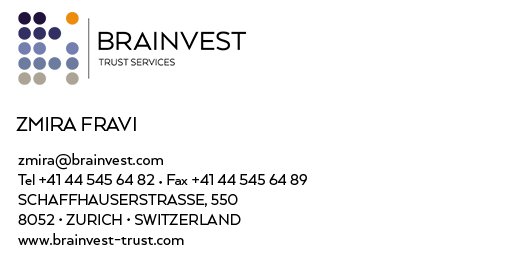
<style>
.page{position:relative;width:531px;height:260px;background:#ffffff}
.page>*{position:absolute;margin:0}
.t1{font:22px "Arquitecta";color:#000000;text-transform:uppercase}
.t2{font:17px/20px "Arquitecta";letter-spacing:-0.005em;color:#000000;text-transform:uppercase}
.t3{font:18px/20px "Arquitecta";letter-spacing:0.01em;color:#000000}
.t4{font:17px/20px "Arquitecta";letter-spacing:-0.005em;color:#000000}
</style>
<div class="page">
<p class="t1" style="left:16px;top:117px;width:120px;height:14px">Zmira Fravi</p>
<p class="t2" style="left:18px;top:153px;width:289px;height:92px"><span class="t3">zmira@brainvest.com<br></span><span class="t4">Tel +41 44 545 64 82 • Fax +41 44 545 64 89<br></span>Schaffhauserstrasse, 550<br>8052 • Zurich • SwitzerlanD<br><span class="t3">www.brainvest-trust.com</span></p>
</div>
